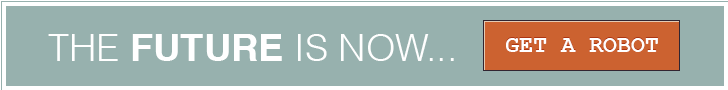
<style>
.page{position:relative;width:728px;height:90px;background:#97b1ae}
.page>*{position:absolute;margin:0}
.t1{font:37.9px "Helvetica-Light";color:#ffffff}
.t2{font:37.9px "Helvetica-Bold";color:#ffffff}
.t3{font:23.3px "CourierNewPS-BoldMT";color:#ffffff}
</style>
<div class="page">
<p class="t1" style="left:48px;top:34px;width:406px;height:27px">THE <span class="t2">FUTURE</span> IS NOW...</p>
<p class="t3" style="left:506px;top:38px;width:152px;height:14px">GET A ROBOT</p>
</div>
